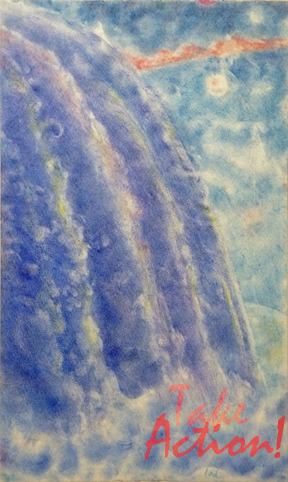
<style>
.page{position:relative;width:288px;height:482px}
.page>*{position:absolute;margin:0}
.t1{font:60px "Mistral";color:#d88176}
.t2{font:60px "Mistral";color:#d24444}
</style>
<div class="page">
<p class="t1" style="left:168px;top:384px;width:80px;height:44px">Take</p>
<p class="t2" style="left:144px;top:413px;width:130px;height:47px">Action</p>
<p class="t2" style="left:274px;top:416px;width:12px;height:42px">!</p>
</div>
